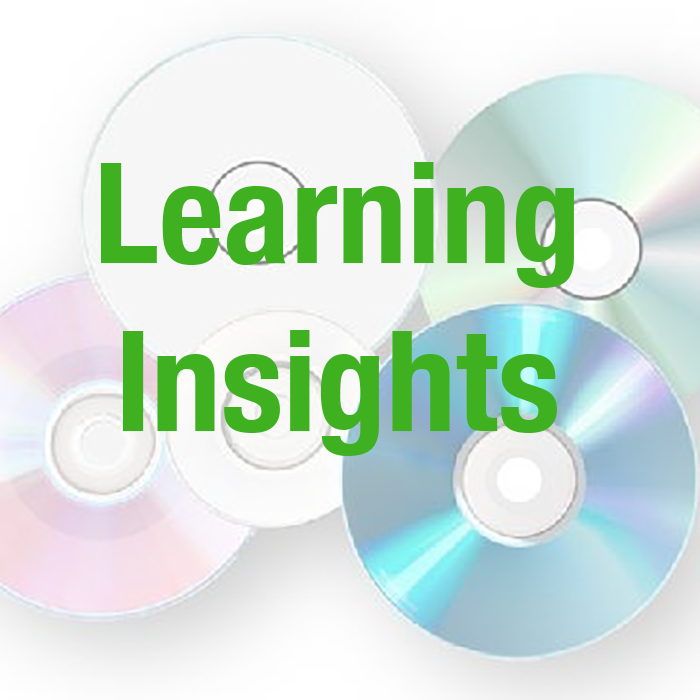
<style>
.page{position:relative;width:700px;height:700px}
.page>*{position:absolute;margin:0}
.t1{font:140px "HelveticaNeue-CondensedBold";color:#3fb121}
</style>
<div class="page">
<p class="t1" style="left:100px;top:162px;width:474px;height:294px;text-align:center">Learning<br>Insights</p>
</div>
